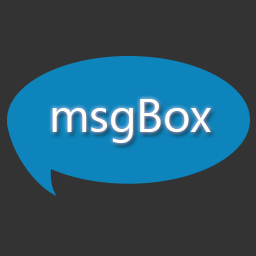
<style>
.page{position:relative;width:256px;height:256px;background:#333333}
.page>*{position:absolute;margin:0}
.t1{font:46.6px "SegoeUI";color:#fefdf7}
</style>
<div class="page">
<p class="t1" style="left:52px;top:99px;width:159px;height:44px">msgBox</p>
</div>
